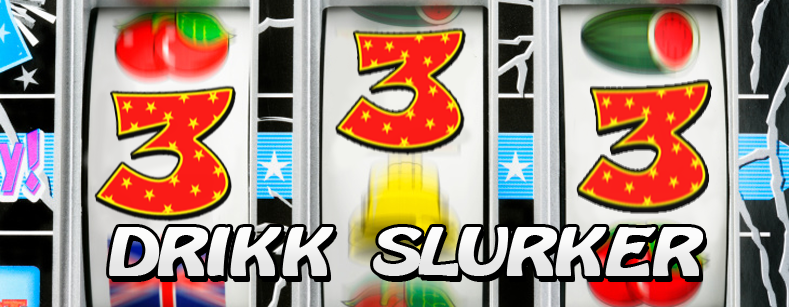
<style>
.page{position:relative;width:790px;height:307px}
.page>*{position:absolute;margin:0}
.t1{font:55.7px "BATAVIA";color:#f5f5f3;font-weight:bold}
</style>
<div class="page">
<p class="t1" style="left:109px;top:227px;width:594px;height:49px">DRIKK  SLURKER</p>
</div>
